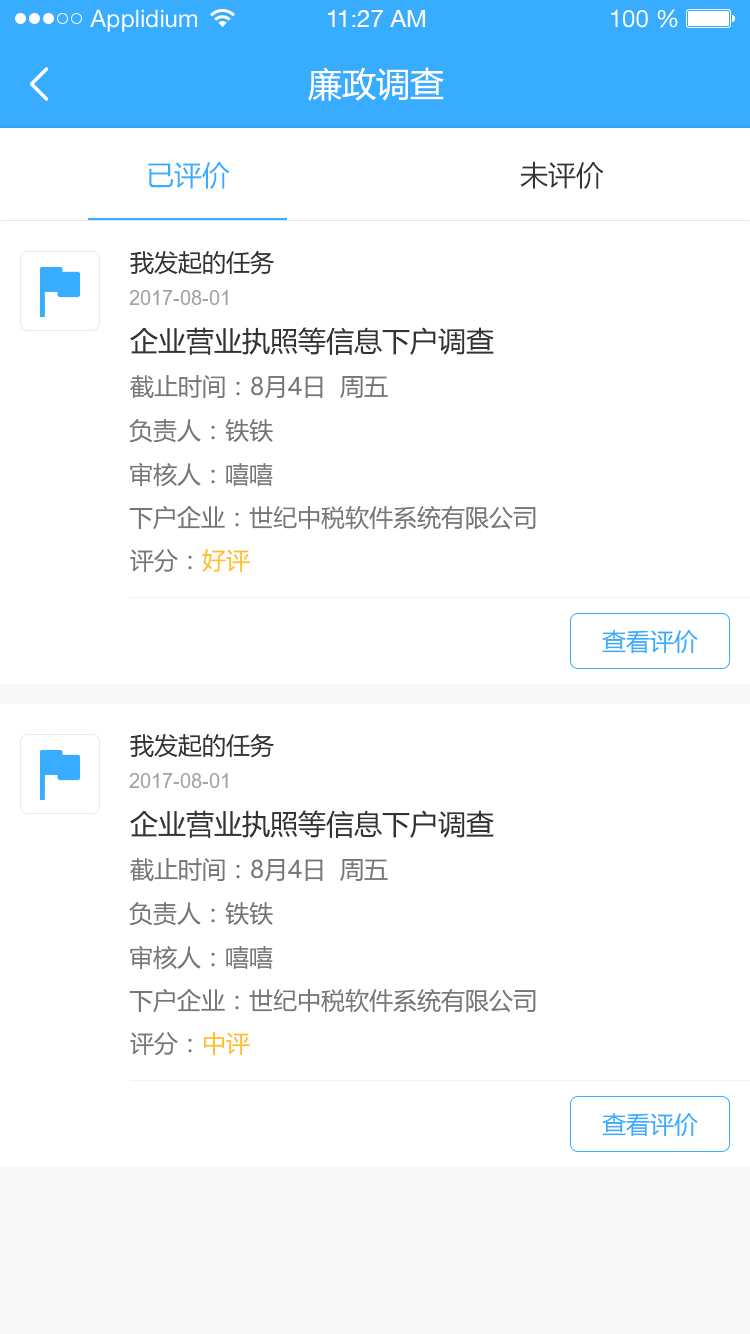
<style>
.page{position:relative;width:750px;height:1334px;background:#ffffff}
.page>*{position:absolute;margin:0}
.t1{font:24px "HelveticaNeueLTStd-Roman";color:#ffffff}
.t2{font:24px "HelveticaNeueCE-Roman";color:#ffffff}
.t3{font:34px "MicrosoftYaHei";color:#ffffff}
.t4{font:28px "MicrosoftYaHei";color:#333333}
.t5{font:28px "MicrosoftYaHei";color:#38adff}
.t6{font:24px "MicrosoftYaHei";color:#333333}
.t7{font:20px "ArialMT";color:#a3a3a3}
.t8{font:24px "MicrosoftYaHei";color:#777777}
.t9{font:24px "MicrosoftYaHei";color:#ffc027}
.t10{font:24px "MicrosoftYaHei";color:#38adff}
</style>
<div class="page">
<p class="t1" style="left:90px;top:9px;width:107px;height:23px">Applidium</p>
<p class="t2" style="left:328px;top:10px;width:98px;height:17px">11:27 AM</p>
<p class="t1" style="left:611px;top:9px;width:67px;height:19px">100 %</p>
<p class="t3" style="left:308px;top:67px;width:136px;height:34px">廉政调查</p>
<p class="t4" style="left:520px;top:161px;width:84px;height:28px">未评价</p>
<p class="t5" style="left:148px;top:162px;width:82px;height:27px">已评价</p>
<p class="t6" style="left:130px;top:250px;width:144px;height:25px">我发起的任务</p>
<p class="t7" style="left:129px;top:290px;width:99px;height:15px">2017-08-01</p>
<p class="t4" style="left:130px;top:327px;width:364px;height:28px">企业营业执照等信息下户调查</p>
<p class="t8" style="left:130px;top:375px;width:258px;height:24px">截止时间：8月4日  周五</p>
<p class="t8" style="left:129px;top:419px;width:144px;height:24px">负责人：铁铁</p>
<p class="t8" style="left:130px;top:462px;width:143px;height:25px">审核人：嘻嘻</p>
<p class="t8" style="left:129px;top:506px;width:407px;height:24px">下户企业：世纪中税软件系统有限公司</p>
<p class="t8" style="left:130px;top:549px;width:120px;height:24px">评分：<span class="t9">好评</span></p>
<p class="t10" style="left:602px;top:630px;width:96px;height:24px">查看评价</p>
<p class="t6" style="left:130px;top:733px;width:144px;height:25px">我发起的任务</p>
<p class="t7" style="left:129px;top:773px;width:99px;height:15px">2017-08-01</p>
<p class="t4" style="left:130px;top:810px;width:364px;height:28px">企业营业执照等信息下户调查</p>
<p class="t8" style="left:130px;top:858px;width:258px;height:24px">截止时间：8月4日  周五</p>
<p class="t8" style="left:129px;top:902px;width:144px;height:24px">负责人：铁铁</p>
<p class="t8" style="left:130px;top:945px;width:143px;height:25px">审核人：嘻嘻</p>
<p class="t8" style="left:129px;top:989px;width:407px;height:24px">下户企业：世纪中税软件系统有限公司</p>
<p class="t8" style="left:130px;top:1032px;width:120px;height:24px">评分：<span class="t9">中评</span></p>
<p class="t10" style="left:602px;top:1113px;width:96px;height:24px">查看评价</p>
</div>
